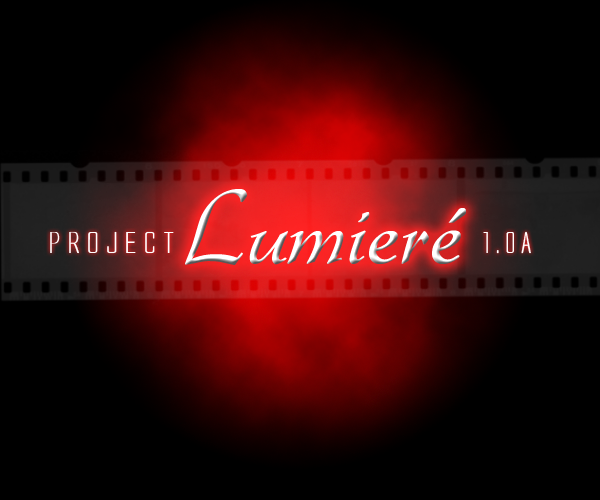
<style>
.page{position:relative;width:600px;height:500px;background:#000000}
.page>*{position:absolute;margin:0}
.t1{font:108px "Gabrielle";letter-spacing:0.005em}
.t2{font:28px "AlienLeague";letter-spacing:0.005em;color:#ffffff;scale:1.47 1}
.t3{font:28px "AlienLeague";letter-spacing:0.005em;color:#ffffff;scale:1.19 1}
</style>
<div class="page">
<p class="t1" style="left:185px;top:189px;width:282px;height:76px">Lumieré</p>
<p class="t2" style="left:50px;top:231px;width:481px;height:23px">PROJECT                 <span class="t3">1.0A</span></p>
</div>
